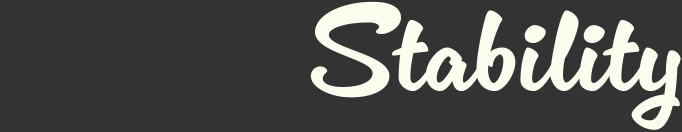
<style>
.page{position:relative;width:682px;height:132px;background:#333333}
.page>*{position:absolute;margin:0}
.t1{font:128.7px "CinemaScript";color:#fcfcef}
</style>
<div class="page">
<p class="t1" style="left:310px;top:1px;width:371px;height:129px">Stability</p>
</div>
